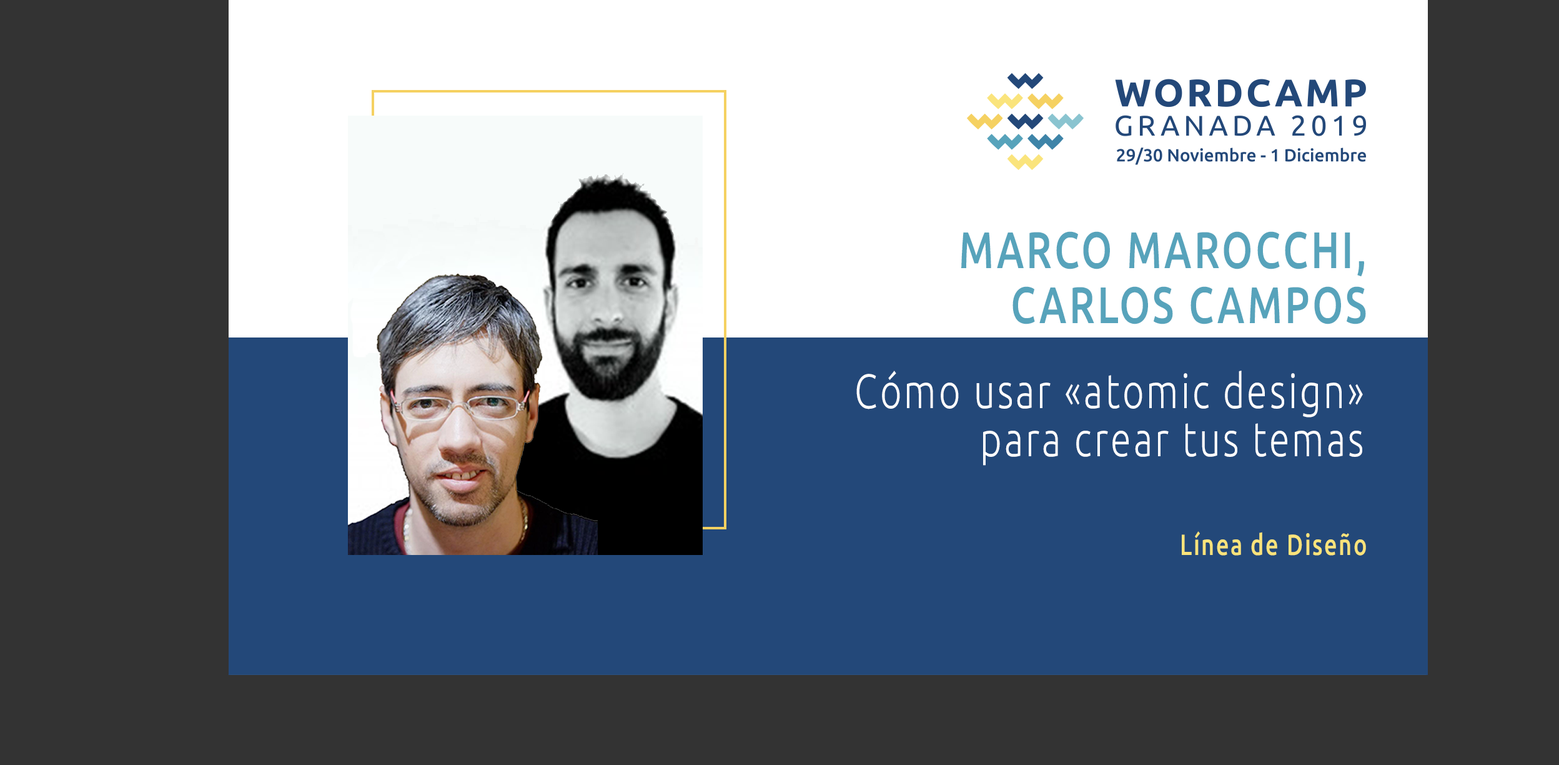
<style>
.page{position:relative;width:1559px;height:765px;background:#333333}
.page>*{position:absolute;margin:0}
.t1{font:51.4px/55.1px "Ubuntu-Medium";letter-spacing:0.068em;color:#57a3bb;scale:0.77 1}
.t2{font:48.2px/48.2px "Ubuntu-Light";letter-spacing:0.068em;color:#ffffff;scale:0.77 1}
.t3{font:29.2px "Ubuntu-Medium";letter-spacing:0.068em;color:#f9e37b;scale:0.77 1}
</style>
<div class="page">
<p class="t1" style="left:961px;top:231px;width:405px;height:93px;text-align:right">MARCO MAROCCHI,  CARLOS CAMPOS</p>
<p class="t2" style="left:857px;top:370px;width:506px;height:95px;text-align:right">Cómo usar «atomic design» para crear tus temas</p>
<p class="t3" style="left:1182px;top:531px;width:184px;height:24px">Línea de Diseño</p>
</div>
